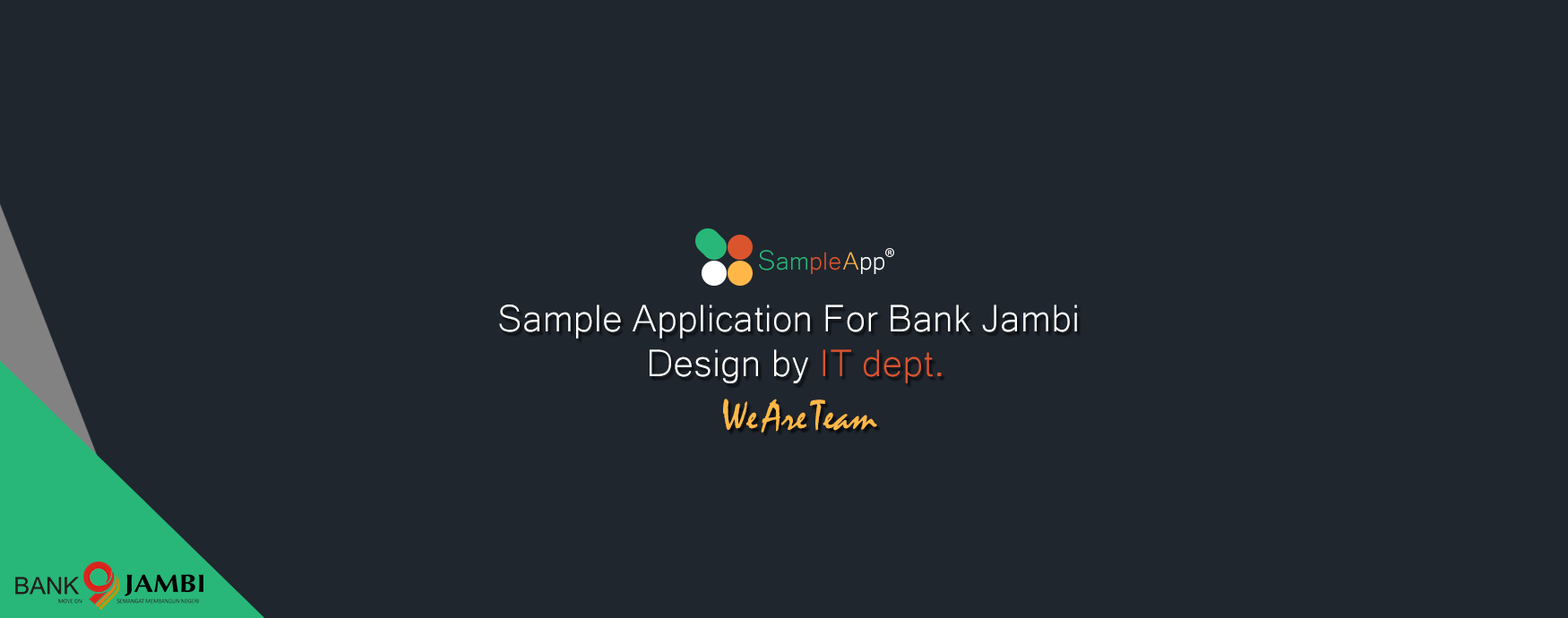
<style>
.page{position:relative;width:1568px;height:618px;background:#1f262e}
.page>*{position:absolute;margin:0}
.t1{font:32.3px "Microsoft-Yi-Baiti";color:#da542e}
.t2{font:35.8px "Microsoft-Yi-Baiti";color:#28b779}
.t3{font:32.3px "Microsoft-Yi-Baiti";color:#28b779}
.t4{font:32.3px "Microsoft-Yi-Baiti";color:#ffb848}
.t5{font:32.3px "Microsoft-Yi-Baiti";color:#ffffff}
.t6{font:49.3px "Microsoft-Yi-Baiti";color:#ffffff}
.t7{font:49.3px "Microsoft-Yi-Baiti";color:#da542e}
.t8{font:43px "Mistral";color:#ffb848}
</style>
<div class="page">
<p class="t1" style="left:759px;top:250px;width:125px;height:24px"><span class="t2">S</span><span class="t3">am</span>ple <span class="t4">A</span><span class="t5">pp</span></p>
<p class="t6" style="left:499px;top:305px;width:578px;height:34px">Sample Application For Bank Jambi</p>
<p class="t6" style="left:650px;top:349px;width:292px;height:34px">Design by <span class="t7">IT dept.</span></p>
<p class="t8" style="left:723px;top:399px;width:154px;height:34px">We Are Team</p>
</div>
